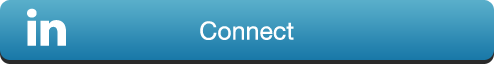
<style>
.page{position:relative;width:494px;height:64px}
.page>*{position:absolute;margin:0}
.t1{font:25px "HelveticaNeue";color:#ffffff}
</style>
<div class="page">
<p class="t1" style="left:200px;top:21px;width:94px;height:19px">Connect</p>
</div>
